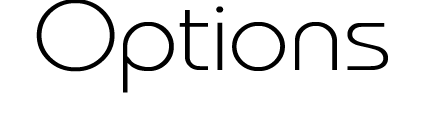
<style>
.page{position:relative;width:435px;height:117px;background:#ffffff}
.page>*{position:absolute;margin:0}
.t1{font:100px "MonaKo";color:#000000;scale:1.1 1}
</style>
<div class="page">
<p class="t1" style="left:36px;top:0px;width:352px;height:93px">Options</p>
</div>
